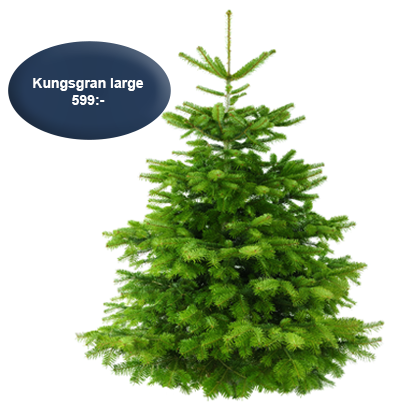
<style>
.page{position:relative;width:399px;height:416px;background:#ffffff}
.page>*{position:absolute;margin:0}
.t1{font:14px "Arial-BoldMT";color:#ffffff}
</style>
<div class="page">
<p class="t1" style="left:33px;top:78px;width:111px;height:27px;text-align:center">Kungsgran large <br>599:-</p>
</div>
